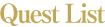
<style>
.page{position:relative;width:105px;height:27px;background:#ffffff}
.page>*{position:absolute;margin:0}
.t1{font:26px "RyuminPro-ExBold";letter-spacing:-0.08em;color:#c2a856}
</style>
<div class="page">
<p class="t1" style="left:0px;top:3px;width:106px;height:23px">Quest List</p>
</div>
